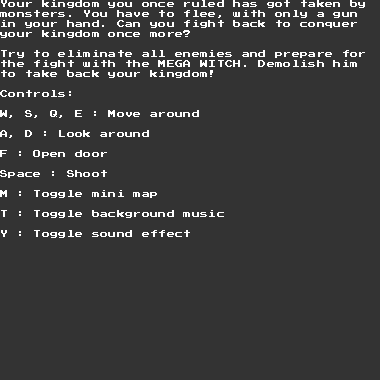
<style>
.page{position:relative;width:380px;height:380px;background:#333333}
.page>*{position:absolute;margin:0}
.t1{font:8.3px "PressStart2P";color:#ffffff}
</style>
<div class="page">
<p class="t1" style="left:0px;top:0px;width:365px;height:238px">Your kingdom you once ruled has got taken by monsters. You have to flee, with only a gun in your hand. Can you fight back to conquer your kingdom once more?<br><br>Try to eliminate all enemies and prepare for the fight with the MEGA WITCH. Demolish him to take back your kingdom!<br><br>Controls:<br><br>W, S, Q, E : Move around<br><br>A, D : Look around<br><br>F : Open door<br><br>Space : Shoot<br><br>M : Toggle mini map<br><br>T : Toggle background music<br><br>Y : Toggle sound effect</p>
</div>
